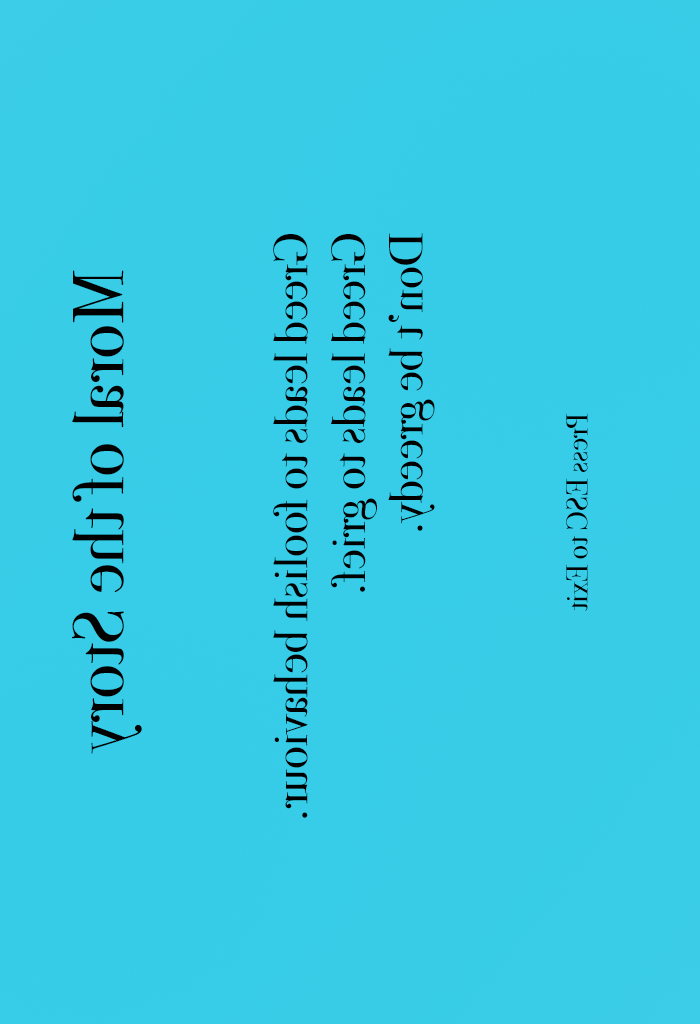
<style>
.page{position:relative;width:700px;height:1024px;background:#37cce7}
.page>*{position:absolute;margin:0}
.t1{font:48px "BodoniSvtyTwoOSITCTT-Book";color:#000000}
.t2{font:72px "BodoniSvtyTwoOSITCTT-Book";color:#000000}
.t3{font:30px "BodoniSvtyTwoOSITCTT-Book";color:#000000}
</style>
<div class="page">
<p class="t1" style="left:273px;top:233px;width:162px;height:585px;rotate:90deg">Greed leads to foolish behaviour.<br>Greed leads to grief.<br>Don’t be greedy.</p>
<p class="t2" style="left:72px;top:270px;width:70px;height:484px;rotate:90deg">Moral of the Story</p>
<p class="t3" style="left:566px;top:413px;width:22px;height:198px;rotate:90deg">Press ESC to Exit</p>
</div>
